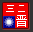
<style>
.page{position:relative;width:33px;height:32px;background:#f20000}
.page>*{position:absolute;margin:0}
.t1{font:10.4px "SimSun";color:#ffffff}
.t2{font:11.7px "SimSun";color:#ffffff}
</style>
<div class="page">
<p class="t1" style="left:6px;top:5px;width:19px;height:7px">三二</p>
<p class="t2" style="left:16px;top:15px;width:11px;height:12px">晋</p>
</div>
